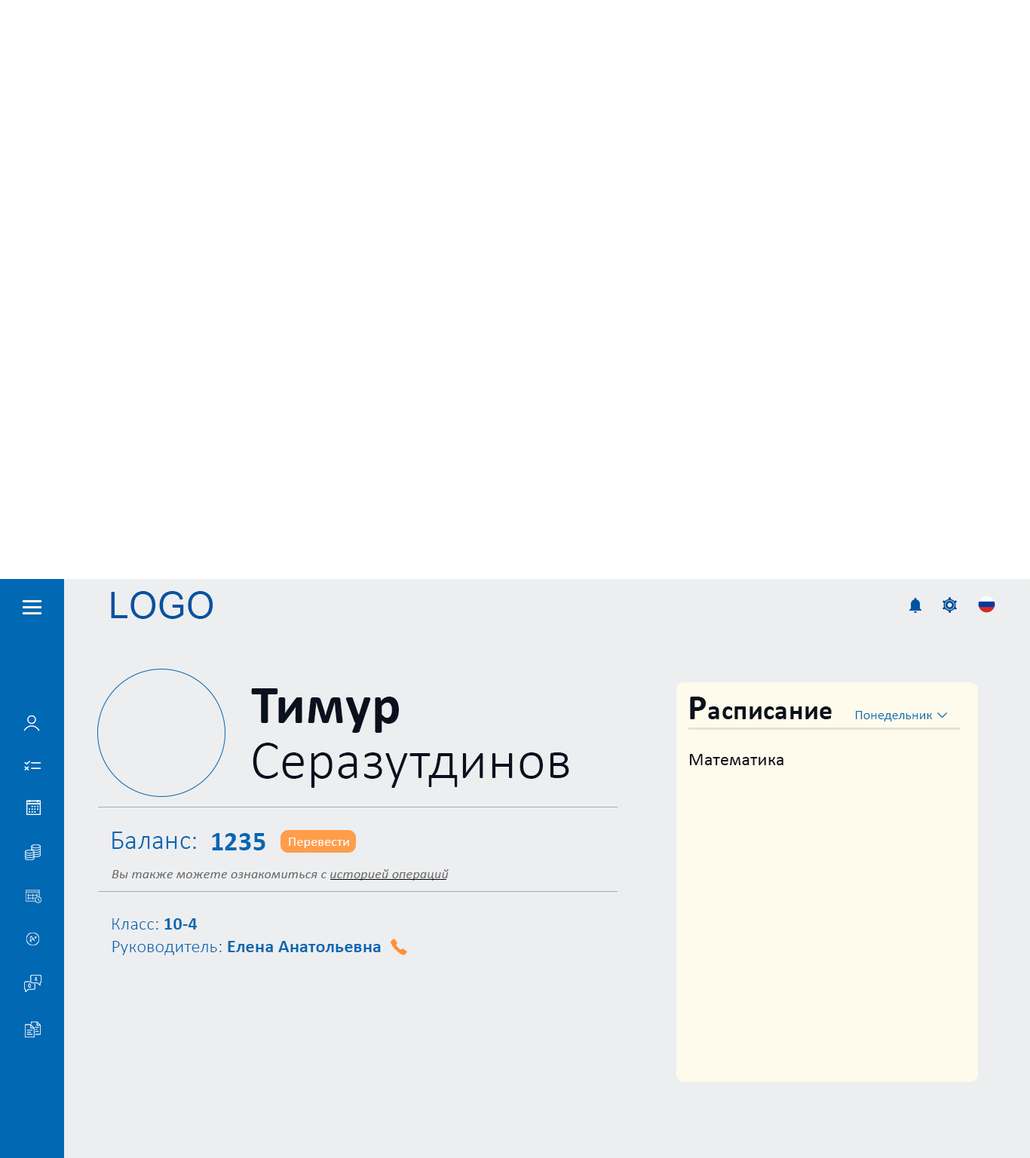
<style>
.page{position:relative;width:1030px;height:1158px;background:#ffffff}
.page>*{position:absolute;margin:0}
.t1{font:36.2px "ArialMT";letter-spacing:0.01em;color:#00549f}
.t2{font:54.3px "Calibri-Bold";letter-spacing:0.01em;color:#0a101d}
.t3{font:27.1px "Calibri-Bold";letter-spacing:0.01em;color:#0a101d}
.t4{font:36.2px "Calibri-Bold";letter-spacing:0.01em;color:#0a101d}
.t5{font:13.6px "Calibri-Light";letter-spacing:0.01em;color:#0168b3}
.t6{font:54.3px "Calibri-Light";letter-spacing:0.01em;color:#0a101d}
.t7{font:18.1px "Calibri";letter-spacing:0.01em;color:#0a101d}
.t8{font:27.1px "Calibri-Light";letter-spacing:0.01em;color:#0168b3}
.t9{font:27.1px "Calibri-Bold";letter-spacing:0.01em;color:#0168b3}
.t10{font:13.6px "Calibri";letter-spacing:0.01em;color:#ffffff}
.t11{font:13.6px "Calibri-Italic";letter-spacing:0.01em;color:#686868}
.t12{font:18.1px "Calibri-Light";letter-spacing:0.01em;color:#0168b3}
.t13{font:18.1px "Calibri-Bold";letter-spacing:0.01em;color:#0168b3}
</style>
<div class="page">
<p class="t1" style="left:111px;top:591px;width:102px;height:28px">LOGO</p>
<p class="t2" style="left:251px;top:688px;width:148px;height:45px">Тимур</p>
<p class="t3" style="left:690px;top:697px;width:142px;height:22px"><span class="t4">Р</span>асписание</p>
<p class="t5" style="left:856px;top:711px;width:76px;height:10px">Понедельник</p>
<p class="t6" style="left:253px;top:743px;width:316px;height:45px">Серазутдинов</p>
<p class="t7" style="left:689px;top:754px;width:94px;height:11px">Математика</p>
<p class="t8" style="left:112px;top:832px;width:84px;height:17px">Баланс:</p>
<p class="t9" style="left:212px;top:833px;width:53px;height:17px">1235</p>
<p class="t10" style="left:289px;top:838px;width:60px;height:10px">Перевести</p>
<p class="t11" style="left:112px;top:869px;width:337px;height:12px">Вы также можете ознакомиться с историей операций</p>
<p class="t12" style="left:112px;top:918px;width:86px;height:12px">Класс: <span class="t13">10-4</span></p>
<p class="t13" style="left:112px;top:941px;width:269px;height:14px"><span class="t12">Руководитель:</span> Елена Анатольевна</p>
</div>
